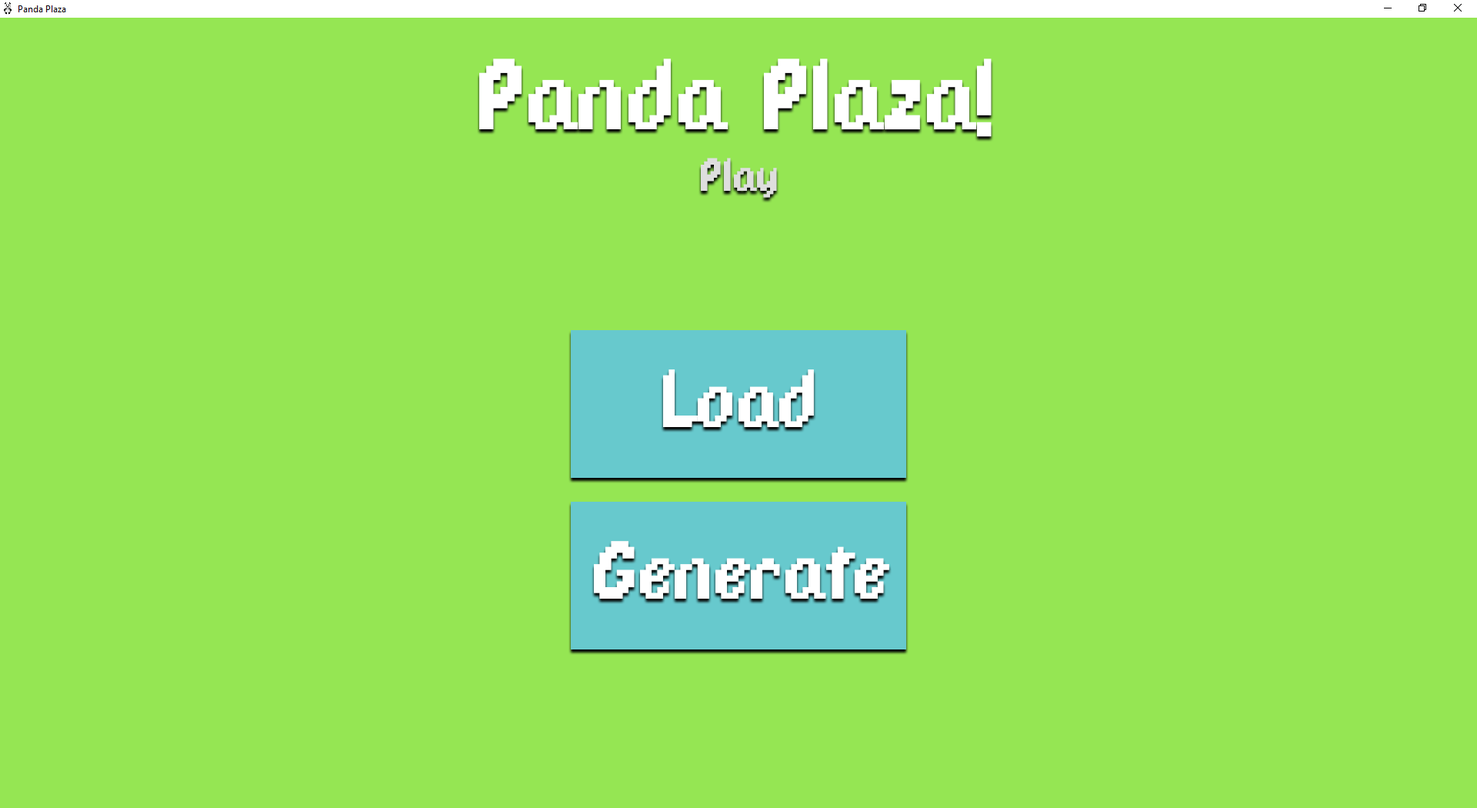
<style>
.page{position:relative;width:1477px;height:808px;background:#95e653}
.page>*{position:absolute;margin:0}
.t1{font:109.2px "DPComicRegular";color:#ffffff}
.t2{font:50.8px "DPComicRegular";color:#dedede}
.t3{font:89.2px "DPComicRegular";color:#ffffff}
</style>
<div class="page">
<p class="t1" style="left:479px;top:58px;width:512px;height:79px">Panda Plaza!</p>
<p class="t2" style="left:701px;top:158px;width:76px;height:40px">Play</p>
<p class="t3" style="left:663px;top:369px;width:151px;height:58px">Load</p>
<p class="t3" style="left:594px;top:541px;width:295px;height:57px">Generate</p>
</div>
